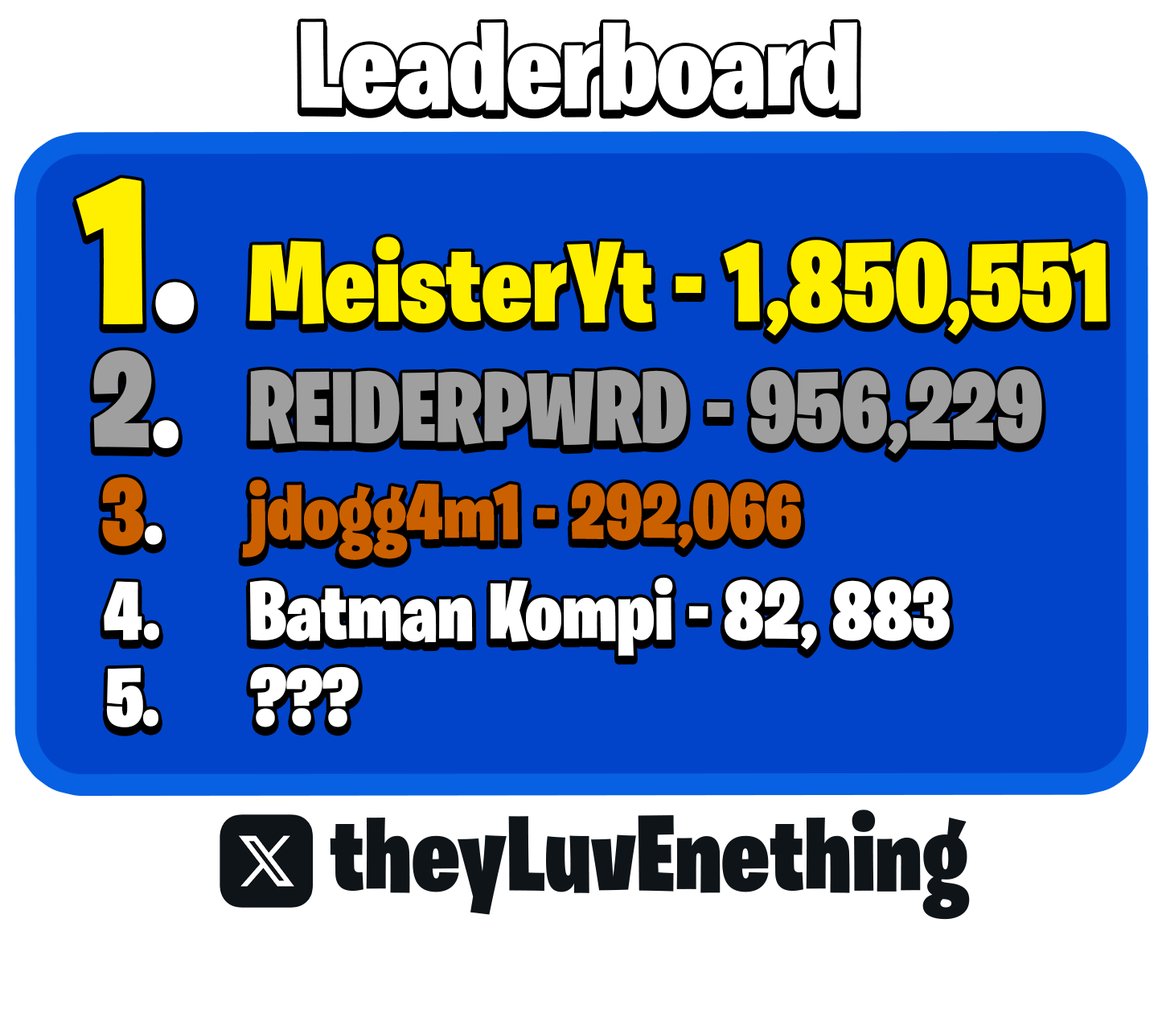
<style>
.page{position:relative;width:1158px;height:1030px;background:#ffffff}
.page>*{position:absolute;margin:0}
.t1{font:124.6px "BurbankBigCondensed-Black";color:#ffffff}
.t2{font:209.4px "BurbankBigCondensed-Black";color:#fff000}
.t3{font:209.4px "BurbankBigCondensed-Black";color:#ffffff}
.t4{font:113.3px "BurbankBigCondensed-Black";color:#fff000}
.t5{font:137.2px "BurbankBigCondensed-Black";color:#9f9f9f}
.t6{font:137.2px "BurbankBigCondensed-Black";color:#ffffff}
.t7{font:100.3px "BurbankBigCondensed-Black";color:#9f9f9f}
.t8{font:93.3px "BurbankBigCondensed-Black";color:#cb6000}
.t9{font:93.3px "BurbankBigCondensed-Black";color:#ffffff}
.t10{font:79.2px "BurbankBigCondensed-Black";color:#cb6000}
.t11{font:82.8px "BurbankBigCondensed-Black";color:#ffffff}
.t12{font:108.2px "BurbankBigCondensed-Black";color:#0f1419}
</style>
<div class="page">
<p class="t1" style="left:301px;top:22px;width:556px;height:88px">Leaderboard</p>
<p class="t2" style="left:76px;top:178px;width:119px;height:147px">1<span class="t3">.</span></p>
<p class="t4" style="left:249px;top:236px;width:858px;height:99px">MeisterYt - 1,850,551</p>
<p class="t5" style="left:93px;top:350px;width:86px;height:98px">2<span class="t6">.</span></p>
<p class="t7" style="left:250px;top:369px;width:792px;height:85px">REIDERPWRD - 956,229</p>
<p class="t8" style="left:102px;top:477px;width:60px;height:69px">3<span class="t9">.</span></p>
<p class="t10" style="left:242px;top:479px;width:559px;height:81px">jdogg4m1 - 292,066</p>
<p class="t11" style="left:104px;top:581px;width:55px;height:59px">4.</p>
<p class="t11" style="left:249px;top:577px;width:701px;height:79px">Batman Kompi - 82, 883</p>
<p class="t11" style="left:250px;top:666px;width:109px;height:61px">???</p>
<p class="t11" style="left:106px;top:668px;width:52px;height:59px">5.</p>
<p class="t12" style="left:330px;top:809px;width:640px;height:110px">theyLuvEnething</p>
</div>
